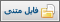
<style>
.page{position:relative;width:60px;height:22px}
.page>*{position:absolute;margin:0}
.t1{font:8px "Tahoma"}
</style>
<div class="page">
<p class="t1" style="left:4px;top:6px;width:35px;height:9px">فایل متنی</p>
</div>
